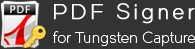
<style>
.page{position:relative;width:195px;height:49px;background:#333333}
.page>*{position:absolute;margin:0}
.t1{font:21px "Dual-300";letter-spacing:0.155em;color:#ffffff;font-weight:bold}
.t2{font:15px "Dual-300";letter-spacing:0.025em;color:#ffffff}
</style>
<div class="page">
<p class="t1" style="left:54px;top:3px;width:141px;height:21px">PDF Signer</p>
<p class="t2" style="left:53px;top:31px;width:143px;height:15px">for Tungsten Capture</p>
</div>
